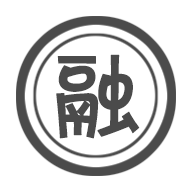
<style>
.page{position:relative;width:192px;height:192px;background:#ffffff}
.page>*{position:absolute;margin:0}
.t1{font:104.4px "FZKATJW--GB1-0";color:#4b4b4b;font-weight:bold}
</style>
<div class="page">
<p class="t1" style="left:56px;top:54px;width:84px;height:85px">融</p>
</div>
